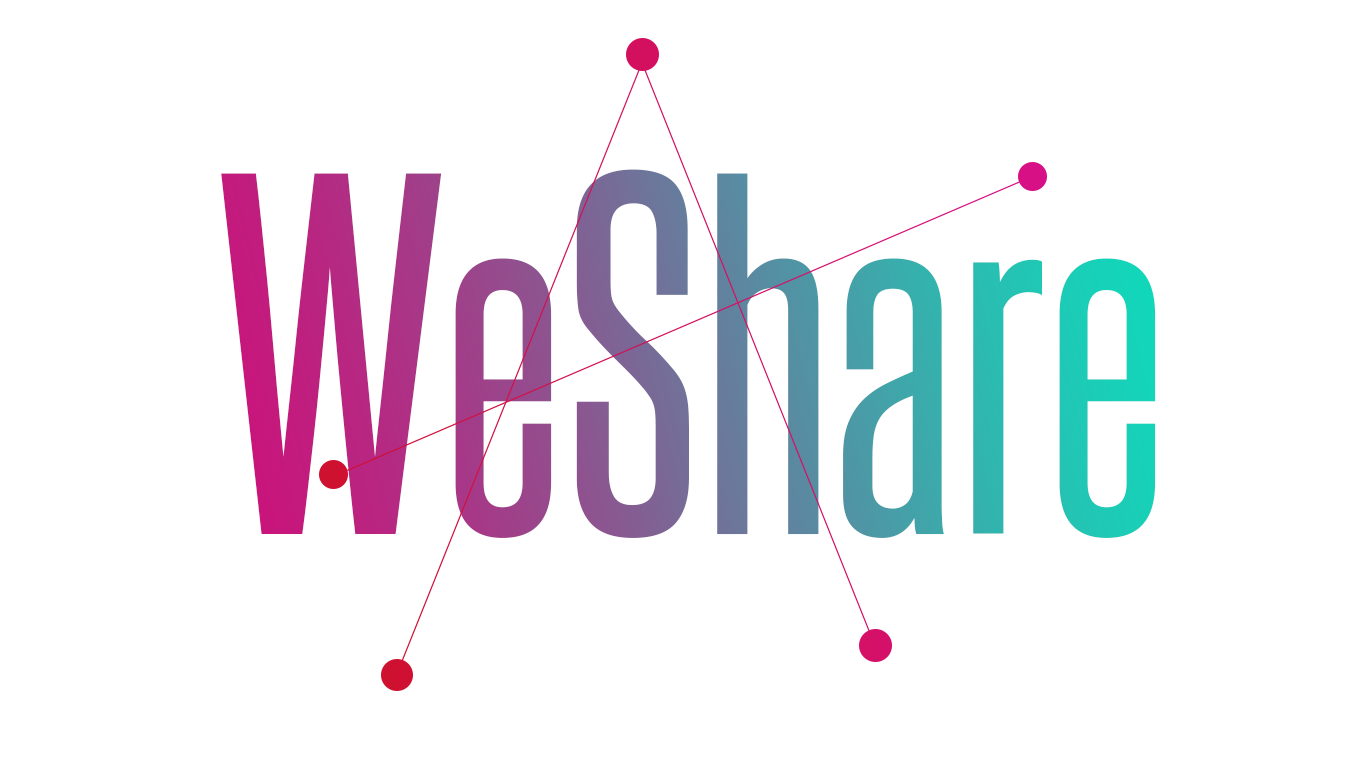
<style>
.page{position:relative;width:1366px;height:768px;background:#ffffff}
.page>*{position:absolute;margin:0}
.t1{font:438px "SteelfishRg-Regular"}
</style>
<div class="page">
<p class="t1" style="left:221px;top:169px;width:935px;height:369px">WeShare</p>
</div>
